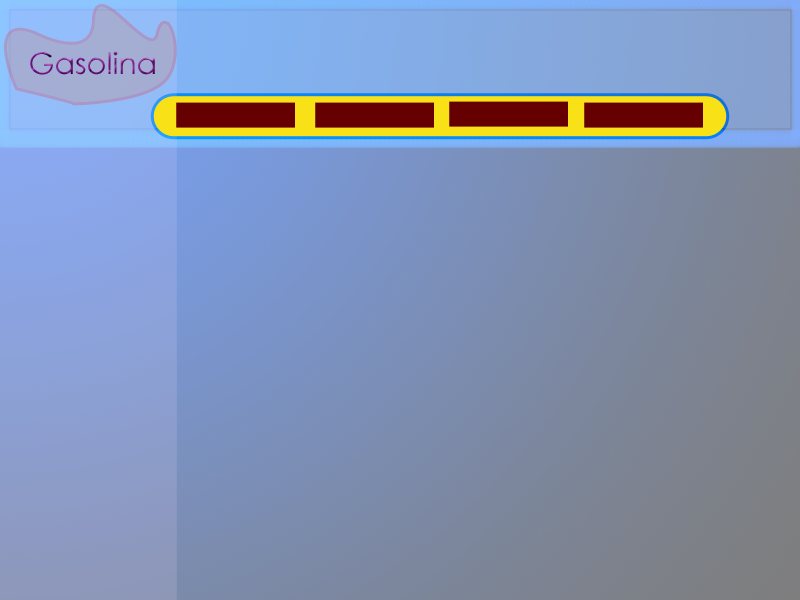
<style>
.page{position:relative;width:800px;height:600px}
.page>*{position:absolute;margin:0}
.t1{font:30px "CenturyGothic"}
</style>
<div class="page">
<p class="t1" style="left:30px;top:51px;width:125px;height:24px">Gasolina</p>
</div>
